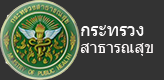
<style>
.page{position:relative;width:164px;height:80px;background:#333333}
.page>*{position:absolute;margin:0}
.t1{font:18px "Tahoma";color:#fcfbfb}
.t2{font:16px "Tahoma";color:#fcf8f8}
</style>
<div class="page">
<p class="t1" style="left:81px;top:25px;width:63px;height:11px">กระทรวง</p>
<p class="t2" style="left:80px;top:43px;width:73px;height:13px">สาธารณสุข</p>
</div>
